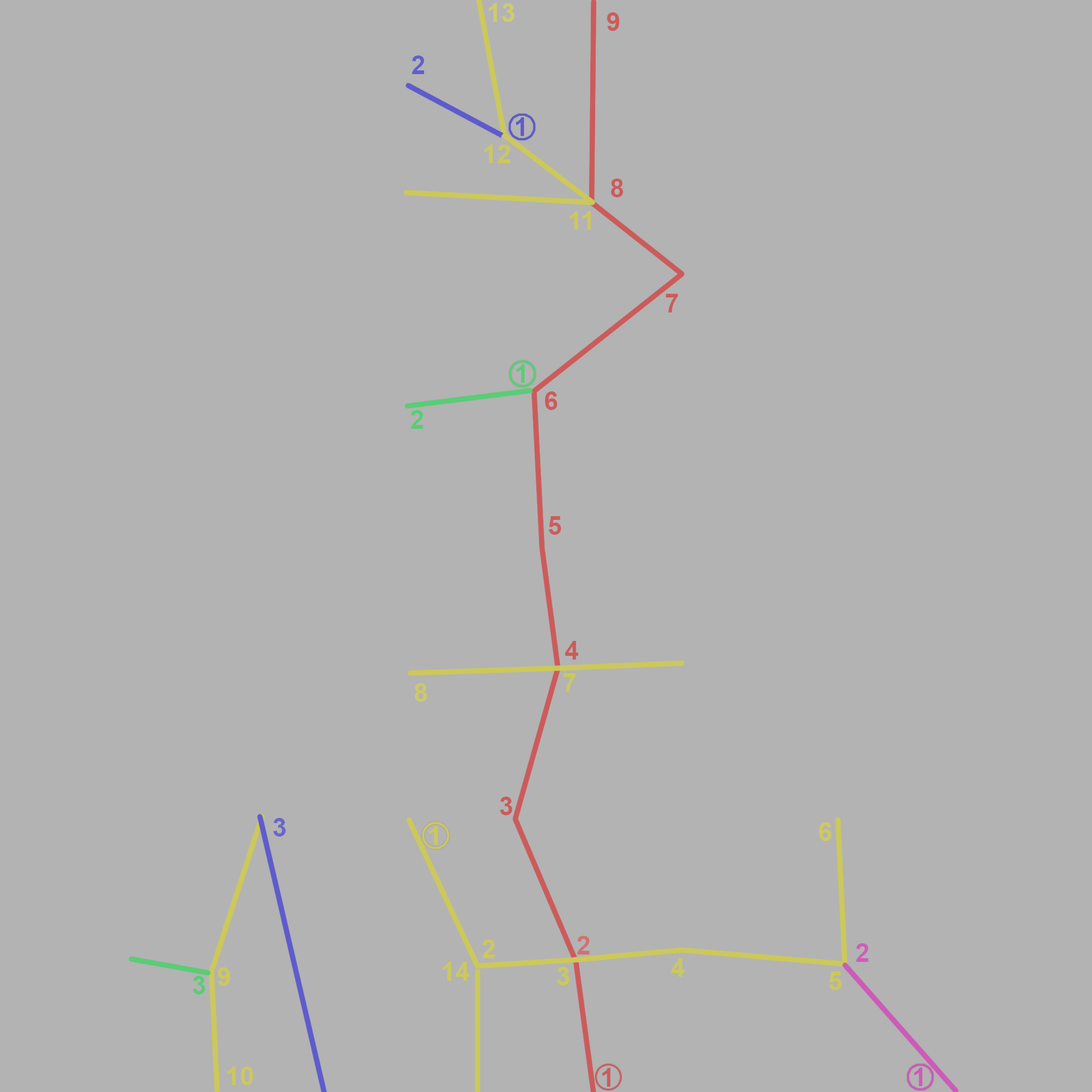
<style>
.page{position:relative;width:1092px;height:1092px;background:#b3b3b3}
.page>*{position:absolute;margin:0}
.t1{font:25.6px "Arial-BoldMT";color:#cecb70}
.t2{font:25.6px "Arial-BoldMT";color:#cc5c5c}
.t3{font:25.6px "Arial-BoldMT";color:#625fcc}
.t4{font:25.6px "Arial-BoldMT";color:#5e5bcc}
.t5{font:25.6px "Arial-BoldMT";color:#ccc85b}
.t6{font:25.6px "Arial-BoldMT";color:#cc5b5b}
.t7{font:25.6px "Arial-BoldMT";color:#5bcc76}
.t8{font:25.6px "Arial-BoldMT";color:#cc5d5d}
.t9{font:25.6px "Arial-BoldMT";color:#cdc965}
.t10{font:25.6px "Arial-BoldMT";color:#6966cd}
.t11{font:25.6px "Arial-BoldMT";color:#cdc964}
.t12{font:25.6px "Arial-BoldMT";color:#ce7272}
.t13{font:25.6px "Arial-BoldMT";color:#cc5fb9}
.t14{font:25.6px "Arial-BoldMT";color:#cc5bb8}
</style>
<div class="page">
<p class="t1" style="left:488px;top:3px;width:27px;height:19px">13</p>
<p class="t2" style="left:607px;top:12px;width:13px;height:19px">9</p>
<p class="t3" style="left:412px;top:55px;width:12px;height:19px">2</p>
<p class="t4" style="left:516px;top:117px;width:8px;height:19px">1</p>
<p class="t5" style="left:484px;top:144px;width:26px;height:19px">12</p>
<p class="t6" style="left:611px;top:179px;width:12px;height:18px">8</p>
<p class="t5" style="left:569px;top:211px;width:22px;height:19px">11</p>
<p class="t2" style="left:666px;top:294px;width:12px;height:18px">7</p>
<p class="t7" style="left:516px;top:364px;width:9px;height:19px">1</p>
<p class="t6" style="left:545px;top:391px;width:12px;height:19px">6</p>
<p class="t7" style="left:411px;top:410px;width:12px;height:19px">2</p>
<p class="t8" style="left:549px;top:516px;width:12px;height:19px">5</p>
<p class="t6" style="left:565px;top:641px;width:14px;height:19px">4</p>
<p class="t5" style="left:564px;top:673px;width:12px;height:19px">7</p>
<p class="t9" style="left:415px;top:683px;width:12px;height:19px">8</p>
<p class="t6" style="left:500px;top:797px;width:12px;height:18px">3</p>
<p class="t10" style="left:273px;top:818px;width:13px;height:19px">3</p>
<p class="t5" style="left:429px;top:826px;width:9px;height:19px">1</p>
<p class="t11" style="left:819px;top:822px;width:12px;height:19px">6</p>
<p class="t5" style="left:482px;top:939px;width:13px;height:19px">2</p>
<p class="t12" style="left:577px;top:936px;width:13px;height:18px">2</p>
<p class="t13" style="left:856px;top:943px;width:13px;height:19px">2</p>
<p class="t5" style="left:443px;top:962px;width:26px;height:19px">14</p>
<p class="t5" style="left:671px;top:958px;width:14px;height:19px">4</p>
<p class="t7" style="left:192px;top:976px;width:13px;height:18px">3</p>
<p class="t5" style="left:218px;top:967px;width:12px;height:19px">9</p>
<p class="t5" style="left:557px;top:967px;width:12px;height:18px">3</p>
<p class="t5" style="left:829px;top:971px;width:13px;height:19px">5</p>
<p class="t5" style="left:227px;top:1066px;width:26px;height:19px">10</p>
<p class="t6" style="left:602px;top:1068px;width:9px;height:19px">1</p>
<p class="t14" style="left:914px;top:1067px;width:8px;height:19px">1</p>
</div>
